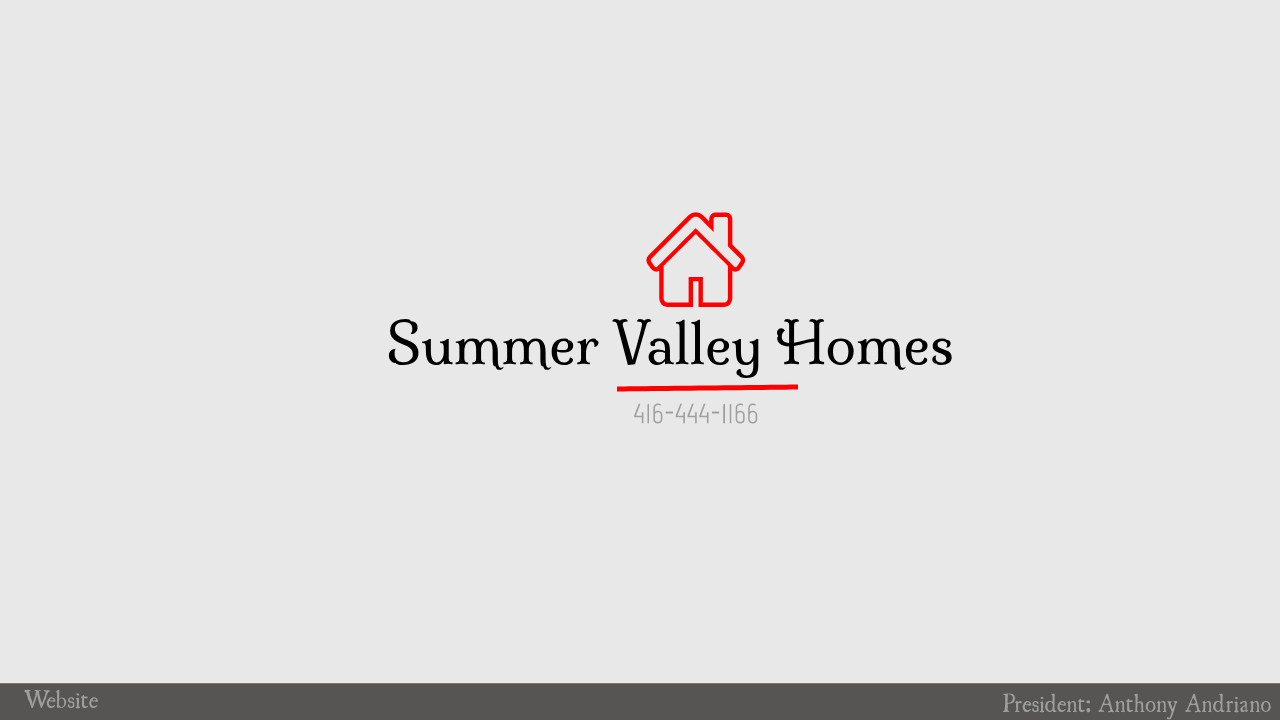
<style>
.page{position:relative;width:1280px;height:720px;background:#e8e8e8}
.page>*{position:absolute;margin:0}
.t1{font:55px "Milonga-Regular";color:#000000}
.t2{font:30px "Marvel-Regular";color:#9e9e9e}
.t3{font:22.5px "UglyQua";color:#9e9e9e}
.t4{font:23px "UglyQua";color:#9e9e9e;scale:0.95 1}
</style>
<div class="page">
<p class="t1" style="left:388px;top:319px;width:564px;height:59px">Summer Valley Homes</p>
<p class="t2" style="left:634px;top:403px;width:124px;height:21px">416-444-1166</p>
<p class="t3" style="left:24px;top:689px;width:74px;height:20px">Website</p>
<p class="t4" style="left:1002px;top:693px;width:269px;height:27px">President: Anthony Andriano</p>
</div>
